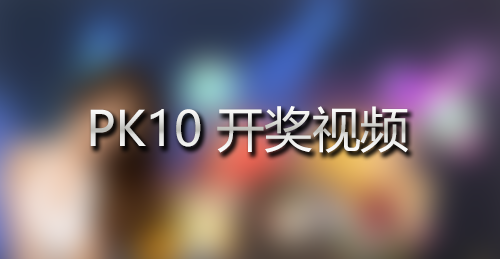
<style>
.page{position:relative;width:500px;height:259px}
.page>*{position:absolute;margin:0}
.t1{font:48px "MicrosoftYaHei"}
</style>
<div class="page">
<p class="t1" style="left:90px;top:106px;width:318px;height:47px">PK10 开奖视频</p>
</div>
